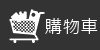
<style>
.page{position:relative;width:100px;height:50px;background:#333333}
.page>*{position:absolute;margin:0}
.t1{font:18px "MicrosoftJhengHeiRegular";color:#ffffff}
</style>
<div class="page">
<p class="t1" style="left:45px;top:18px;width:53px;height:16px">購物車</p>
</div>
